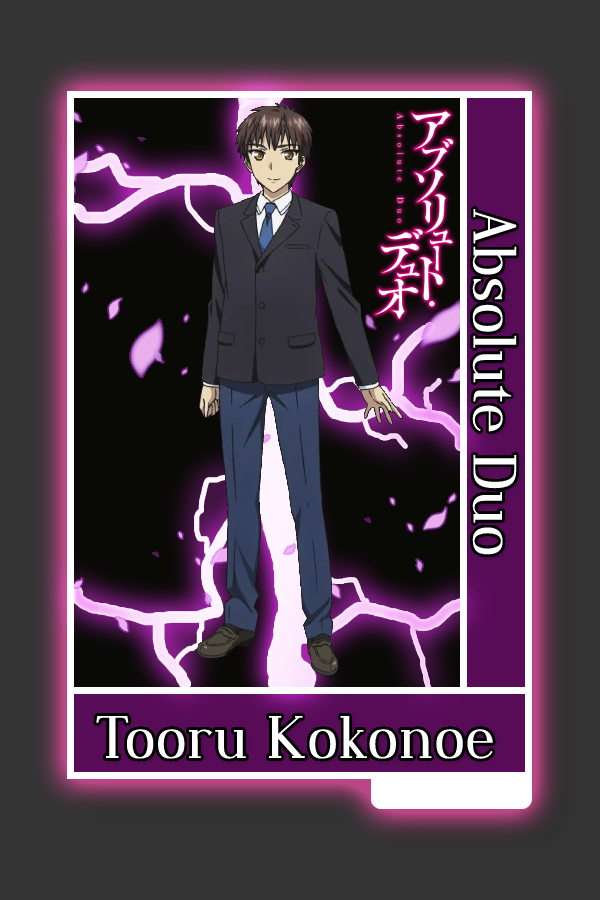
<style>
.page{position:relative;width:600px;height:900px;background:#333333}
.page>*{position:absolute;margin:0}
.t1{font:60px "DustismoRoman";color:#ffffff}
.t2{font:59px "DustismoRoman";color:#ffffff}
</style>
<div class="page">
<p class="t1" style="left:472px;top:208px;width:45px;height:347px;rotate:90deg">Absolute Duo</p>
<p class="t2" style="left:96px;top:715px;width:397px;height:44px">Tooru Kokonoe</p>
</div>
